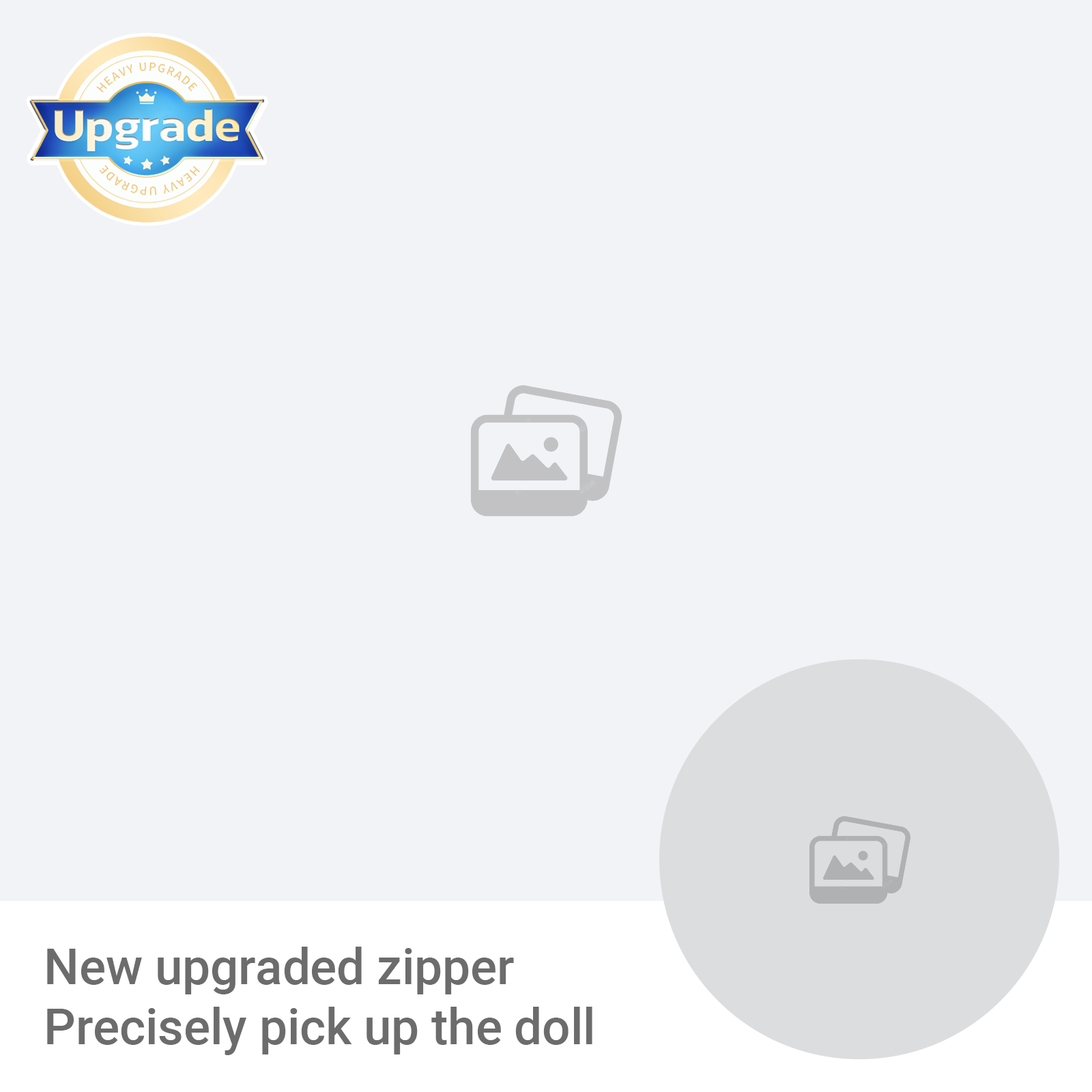
<style>
.page{position:relative;width:1092px;height:1092px;background:#f2f3f6}
.page>*{position:absolute;margin:0}
.t1{font:49.5px/60.1px "Roboto-Medium";color:#6c6c6c}
</style>
<div class="page">
<p class="t1" style="left:47px;top:947px;width:545px;height:108px">New upgraded zipper<br>Precisely pick up the doll</p>
</div>
